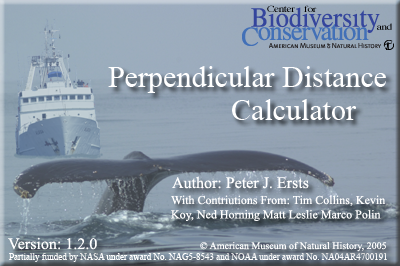
<style>
.page{position:relative;width:400px;height:266px}
.page>*{position:absolute;margin:0}
.t1{font:30px "TimesNewRomanPSMT";color:#ffffff}
.t2{font:16px "TimesNewRomanPSMT";color:#ffffff}
.t3{font:12px "TimesNewRomanPSMT";color:#ffffff}
.t4{font:10px "TimesNewRomanPSMT";color:#ffffff}
.t5{font:9px "TimesNewRomanPSMT";color:#ffffff}
</style>
<div class="page">
<p class="t1" style="left:108px;top:66px;width:278px;height:27px">Perpendicular Distance</p>
<p class="t1" style="left:232px;top:99px;width:124px;height:21px">Calculator</p>
<p class="t2" style="left:172px;top:176px;width:137px;height:13px">Author: Peter J. Ersts</p>
<p class="t3" style="left:171px;top:195px;width:215px;height:26px">With Contriutions From: Tim Collins, Kevin <br>Koy, Ned Horning Matt Leslie Marco Polin</p>
<p class="t2" style="left:8px;top:237px;width:89px;height:13px">Version: 1.2.0</p>
<p class="t4" style="left:200px;top:242px;width:186px;height:10px">© American Museum of Natural History, 2005</p>
<p class="t5" style="left:9px;top:253px;width:378px;height:9px">Partially funded by NASA under award No. NAG5-8543 and NOAA under award No. NA04AR4700191</p>
</div>
